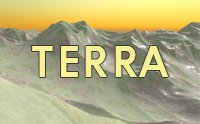
<style>
.page{position:relative;width:200px;height:124px}
.page>*{position:absolute;margin:0}
.t1{font:40px "HYPE";letter-spacing:-0.18em;color:#faf096}
</style>
<div class="page">
<p class="t1" style="left:32px;top:46px;width:137px;height:31px">Terra</p>
</div>
